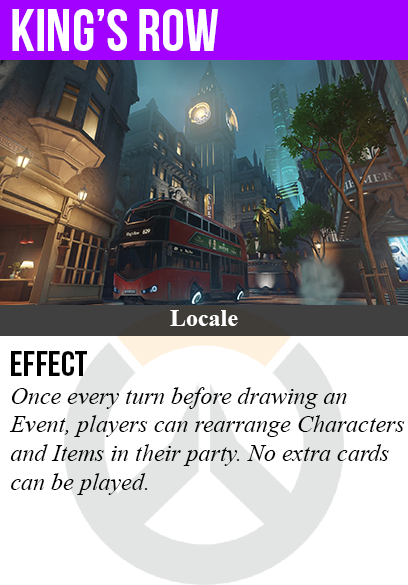
<style>
.page{position:relative;width:408px;height:585px;background:#ffffff}
.page>*{position:absolute;margin:0}
.t1{font:60px "BebasNeue";color:#ffffff}
.t2{font:24px "TimesNewRomanPS-BoldMT";color:#ffffff}
.t3{font:36px "BebasNeue";color:#000000}
.t4{font:24px "TimesNewRomanPS-ItalicMT";color:#000000}
</style>
<div class="page">
<p class="t1" style="left:12px;top:9px;width:206px;height:42px">king’s row</p>
<p class="t2" style="left:170px;top:310px;width:68px;height:16px">Locale</p>
<p class="t3" style="left:11px;top:351px;width:76px;height:25px">Effect</p>
<p class="t4" style="left:9px;top:387px;width:396px;height:108px">Once every turn before drawing an<br>Event, players can rearrange Characters<br>and Items in their party. No extra cards<br>can be played.</p>
</div>
